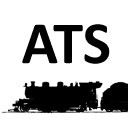
<style>
.page{position:relative;width:128px;height:128px;background:#ffffff}
.page>*{position:absolute;margin:0}
.t1{font:60px "Calibri-Bold";color:#000000}
</style>
<div class="page">
<p class="t1" style="left:22px;top:24px;width:88px;height:40px">ATS</p>
</div>
